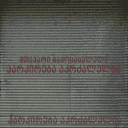
<style>
.page{position:relative;width:128px;height:128px}
.page>*{position:absolute;margin:0}
.t1{font:9px "BPGWeb002Caps";color:#603a3b;scale:0.9 1}
.t2{font:7px "BPGWeb002Caps";color:#5c4041;scale:0.9 1}
.t3{font:9px "BPGWeb002Caps";color:#5c4041;scale:0.9 1}
</style>
<div class="page">
<p class="t1" style="left:6px;top:64px;width:115px;height:9px;opacity:0.9">პარკირება აკრძალულია</p>
<p class="t2" style="left:19px;top:56px;width:89px;height:7px;opacity:0.95">მთავარი გამოსასვლელი</p>
<p class="t3" style="left:8px;top:115px;width:114px;height:9px;opacity:0.85">პარკირება აკრძალულია</p>
</div>
